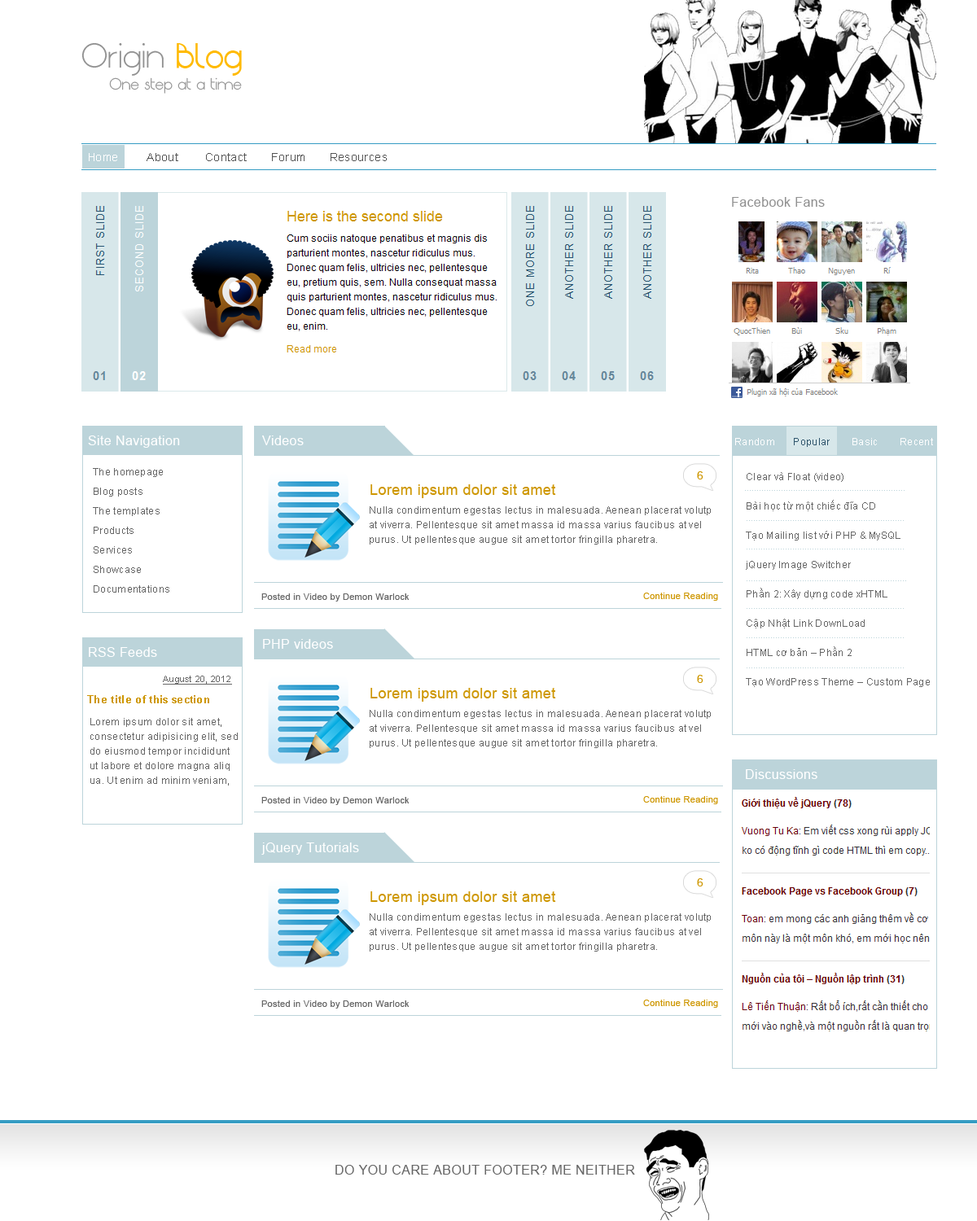
<style>
.page{position:relative;width:977px;height:1221px;background:#ffffff}
.page>*{position:absolute;margin:0}
.t1{font:24.4px "Origin-Regular";letter-spacing:0.025em;color:#919191}
.t2{font:24.4px "Origin-ExtraBold";letter-spacing:0.025em;color:#ffba00}
.t3{font:11.4px "Origin-Regular";letter-spacing:0.025em;color:#919191}
.t4{font:11.4px "ArialMT";letter-spacing:0.025em;color:#545454}
.t5{font:11.4px "ArialMT";letter-spacing:0.025em;color:#ffffff}
.t6{font:13px "ArialMT";letter-spacing:0.025em;color:#919191}
.t7{font:13px "ArialMT";letter-spacing:0.025em;color:#ffffff}
.t8{font:9.8px/4.9px "ArialMT";letter-spacing:0.025em;color:#666666}
.t9{font:11.4px "ArialMT";letter-spacing:0.025em;color:#ce9702}
.t10{font:9.8px/29.3px "ArialMT";letter-spacing:0.025em;color:#666666}
.t11{font:14.7px "ArialMT";letter-spacing:0.025em;color:#ce9702}
.t12{font:9px "ArialMT";letter-spacing:0.025em;color:#666666}
.t13{font:9px "ArialMT";letter-spacing:0.025em;color:#ce9702}
.t14{font:9px "ArialMT";letter-spacing:0.025em;color:#666666;text-decoration:underline}
.t15{font:10.6px "Arial-BoldMT";letter-spacing:0.025em;color:#ce9702}
.t16{font:13px "ArialMT";letter-spacing:0.025em;color:#666666}
</style>
<div class="page">
<p class="t1" style="left:81px;top:42px;width:161px;height:34px">Origin <span class="t2">Blog</span></p>
<p class="t3" style="left:109px;top:77px;width:133px;height:17px">One step at a time</p>
<p class="t4" style="left:89px;top:153px;width:298px;height:8px"><span class="t5">Home</span> About Contact   Forum   Resources</p>
<p class="t6" style="left:732px;top:197px;width:92px;height:10px">Facebook Fans</p>
<p class="t7" style="left:88px;top:435px;width:92px;height:13px">Site Navigation</p>
<p class="t7" style="left:262px;top:435px;width:42px;height:10px">Videos</p>
<p class="t8" style="left:93px;top:468px;width:76px;height:125px">The homepage<br><br><br><br>Blog posts<br><br><br><br>The templates<br><br><br><br>Products<br><br><br><br>Services<br><br><br><br>Showcase<br><br><br><br>Documentations</p>
<p class="t9" style="left:697px;top:471px;width:6px;height:8px">6</p>
<p class="t10" style="left:746px;top:472px;width:183px;height:215px">Clear và Float (video)<br>Bài học từ một chiếc đĩa CD<br>Tạo Mailing list với PHP &amp; MySQL<br>jQuery Image Switcher<br>Phần 2: Xây dựng code xHTML<br>Cập Nhật Link DownLoad<br>HTML cơ bản – Phần 2<br>Tạo WordPress Theme – Custom Page</p>
<p class="t11" style="left:370px;top:484px;width:186px;height:14px">Lorem ipsum dolor sit amet</p>
<p class="t8" style="left:370px;top:506px;width:341px;height:39px">Nulla condimentum egestas lectus in malesuada. Aenean placerat volutp<br><br><br>at viverra. Pellentesque sit amet massa id massa varius faucibus at vel <br><br><br>purus. Ut pellentesque augue sit amet tortor fringilla pharetra.</p>
<p class="t12" style="left:261px;top:593px;width:148px;height:8px">Posted in Video by Demon Warlock</p>
<p class="t13" style="left:643px;top:593px;width:75px;height:8px">Continue Reading</p>
<p class="t7" style="left:263px;top:639px;width:70px;height:10px">PHP videos</p>
<p class="t7" style="left:89px;top:647px;width:68px;height:10px">RSS Feeds</p>
<p class="t14" style="left:163px;top:676px;width:69px;height:9px">August 20, 2012</p>
<p class="t9" style="left:697px;top:675px;width:6px;height:8px">6</p>
<p class="t11" style="left:370px;top:688px;width:186px;height:14px">Lorem ipsum dolor sit amet</p>
<p class="t15" style="left:87px;top:695px;width:122px;height:8px">The title òf this section</p>
<p class="t8" style="left:370px;top:710px;width:341px;height:38px">Nulla condimentum egestas lectus in malesuada. Aenean placerat volutp<br><br><br>at viverra. Pellentesque sit amet massa id massa varius faucibus at vel <br><br><br>purus. Ut pellentesque augue sit amet tortor fringilla pharetra.</p>
<p class="t8" style="left:90px;top:718px;width:148px;height:67px">Lorem ipsum dolor sit amet, <br><br><br>consectetur adipisicing elit, sed <br><br><br>do eiusmod tempor incididunt <br><br><br>ut labore et dolore magna aliq<br><br><br>ua. Ut enim ad minim veniam,</p>
<p class="t7" style="left:746px;top:769px;width:71px;height:10px">Discussions</p>
<p class="t12" style="left:261px;top:797px;width:148px;height:8px">Posted in Video by Demon Warlock</p>
<p class="t13" style="left:643px;top:796px;width:75px;height:8px">Continue Reading</p>
<p class="t7" style="left:261px;top:842px;width:98px;height:13px">jQuery Tutorials</p>
<p class="t9" style="left:697px;top:878px;width:6px;height:8px">6</p>
<p class="t11" style="left:370px;top:891px;width:186px;height:14px">Lorem ipsum dolor sit amet</p>
<p class="t8" style="left:370px;top:913px;width:341px;height:38px">Nulla condimentum egestas lectus in malesuada. Aenean placerat volutp<br><br><br>at viverra. Pellentesque sit amet massa id massa varius faucibus at vel <br><br><br>purus. Ut pellentesque augue sit amet tortor fringilla pharetra.</p>
<p class="t12" style="left:261px;top:1000px;width:148px;height:8px">Posted in Video by Demon Warlock</p>
<p class="t13" style="left:643px;top:999px;width:75px;height:9px">Continue Reading</p>
<p class="t16" style="left:335px;top:1165px;width:300px;height:9px">DO YOU CARE ABOUT FOOTER? ME NEITHER</p>
</div>
